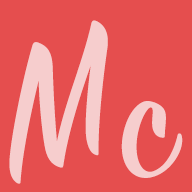
<style>
.page{position:relative;width:192px;height:192px;background:#e54e4e}
.page>*{position:absolute;margin:0}
.t1{font:200px "SignPainter-HouseScript";color:#f6cdcd}
.t2{font:180px "SignPainter-HouseScript";color:#f6cdcd}
</style>
<div class="page">
<p class="t1" style="left:9px;top:20px;width:99px;height:164px;rotate:-20deg">M</p>
<p class="t2" style="left:121px;top:101px;width:62px;height:77px;rotate:-20deg">c</p>
</div>
